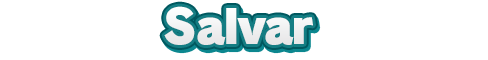
<style>
.page{position:relative;width:488px;height:60px;background:#ffffff}
.page>*{position:absolute;margin:0}
.t1{font:46.7px "RodinPro-UB";letter-spacing:-0.035em;color:#f0f0f1}
</style>
<div class="page">
<p class="t1" style="left:164px;top:6px;width:149px;height:39px">Salvar</p>
</div>
